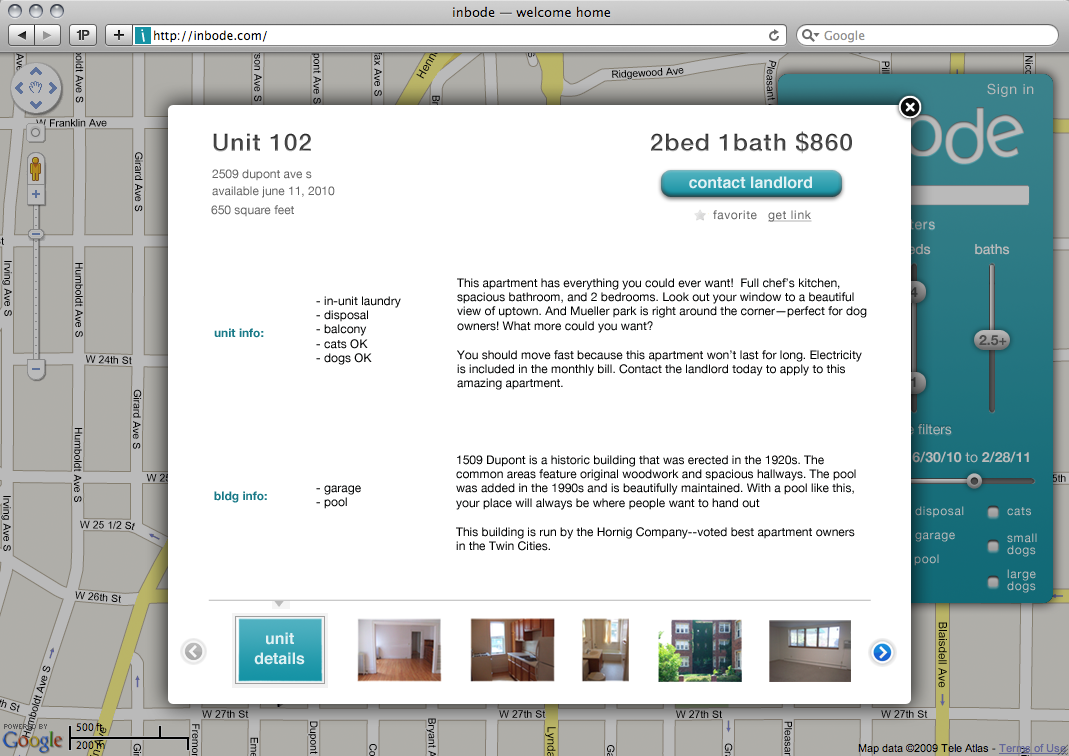
<style>
.page{position:relative;width:1069px;height:756px;background:#ffffff}
.page>*{position:absolute;margin:0}
.t1{font:18px "yorkville";color:#ffffff}
.t2{font:14px "HelveticaNeue";letter-spacing:0.05em;color:#bababa}
.t3{font:24px "HelveticaNeue-Medium";letter-spacing:0.05em;color:#464646}
.t4{font:12px "HelveticaNeue";color:#636363}
.t5{font:16px "Helvetica-Bold";color:#e1f1f3}
.t6{font:12px "HelveticaNeue";letter-spacing:0.05em;color:#636363}
.t7{font:12px "HelveticaNeue";letter-spacing:0.05em;color:#636363;text-decoration:underline}
.t8{font:14px "HelveticaNeue";color:#bababa}
.t9{font:12px "HelveticaNeue";color:#000101}
.t10{font:14px "HelveticaNeue-Bold";color:#323232}
.t11{font:12px "HelveticaNeue-Bold";color:#187987}
.t12{font:14px "HelveticaNeue-Bold";color:#4a4a4a}
.t13{font:14px "HelveticaNeue-Bold";color:#303030}
.t14{font:12px "HelveticaNeue";letter-spacing:0.05em;color:#bababa}
.t15{font:12px "HelveticaNeue";letter-spacing:0.05em;color:#b0b0b0}
.t16{font:12px/12px "HelveticaNeue";letter-spacing:0.05em;color:#bababa}
.t17{font:12px "HelveticaNeue";letter-spacing:0.05em}
.t18{font:16px "Helvetica-Bold";color:#dff0f3}
.t19{font:16px/89.3px "Helvetica-Bold";color:#dff0f3}
</style>
<div class="page">
<p class="t1" style="left:141px;top:29px;width:4px;height:13px;rotate:-9deg">i</p>
<p class="t2" style="left:987px;top:83px;width:47px;height:14px">Sign in</p>
<p class="t3" style="left:213px;top:133px;width:98px;height:19px">Unit 102</p>
<p class="t3" style="left:651px;top:131px;width:201px;height:23px">2bed 1bath $860</p>
<p class="t4" style="left:212px;top:169px;width:100px;height:12px">2509 dupont ave s</p>
<p class="t5" style="left:689px;top:176px;width:123px;height:13px">contact landlord</p>
<p class="t4" style="left:212px;top:186px;width:123px;height:12px">available june 11, 2010</p>
<p class="t4" style="left:211px;top:205px;width:83px;height:12px">650 square feet</p>
<p class="t6" style="left:713px;top:210px;width:44px;height:10px">favorite</p>
<p class="t7" style="left:768px;top:210px;width:44px;height:12px">get link</p>
<p class="t8" style="left:975px;top:244px;width:35px;height:11px">baths</p>
<p class="t9" style="left:457px;top:278px;width:410px;height:112px">This apartment has everything you could ever want!  Full chef’s kitchen, spacious bathroom, and 2 bedrooms. Look out your window to a beautiful view of uptown. And Mueller park is right around the corner—perfect for dog owners! What more could you want? <br><br>You should move fast because this apartment won’t last for long. Electricity is included in the monthly bill. Contact the landlord today to apply to this amazing apartment.</p>
<p class="t10" style="left:910px;top:287px;width:8px;height:10px">4</p>
<p class="t9" style="left:316px;top:296px;width:85px;height:69px">- in-unit laundry <br>- disposal<br>- balcony<br>- cats OK<br>- dogs OK</p>
<p class="t11" style="left:214px;top:328px;width:50px;height:10px">unit info:</p>
<p class="t12" style="left:979px;top:335px;width:28px;height:11px">2.5+</p>
<p class="t13" style="left:911px;top:377px;width:5px;height:10px">1</p>
<p class="t9" style="left:456px;top:455px;width:400px;height:96px">1509 Dupont is a historic building that was erected in the 1920s. The common areas feature original woodwork and spacious hallways. The pool was added in the 1990s and is beautifully maintained. With a pool like this, your place will always be where people want to hand out<br><br>This building is run by the Hornig Company--voted best apartment owners in the Twin Cities.</p>
<p class="t9" style="left:316px;top:485px;width:45px;height:24px">- garage<br>- pool</p>
<p class="t11" style="left:214px;top:491px;width:53px;height:12px">bldg info:</p>
<p class="t14" style="left:915px;top:506px;width:49px;height:12px">disposal</p>
<p class="t14" style="left:1007px;top:507px;width:24px;height:9px">cats</p>
<p class="t15" style="left:915px;top:532px;width:40px;height:10px">garage</p>
<p class="t16" style="left:1007px;top:533px;width:30px;height:24px">small <br>dogs</p>
<p class="t17" style="left:914px;top:554px;width:25px;height:12px">pool</p>
<p class="t16" style="left:1007px;top:569px;width:29px;height:24px">large <br>dogs</p>
<p class="t18" style="left:254px;top:632px;width:51px;height:33px;text-align:center"><span class="t19">unit<br></span>details</p>
</div>
